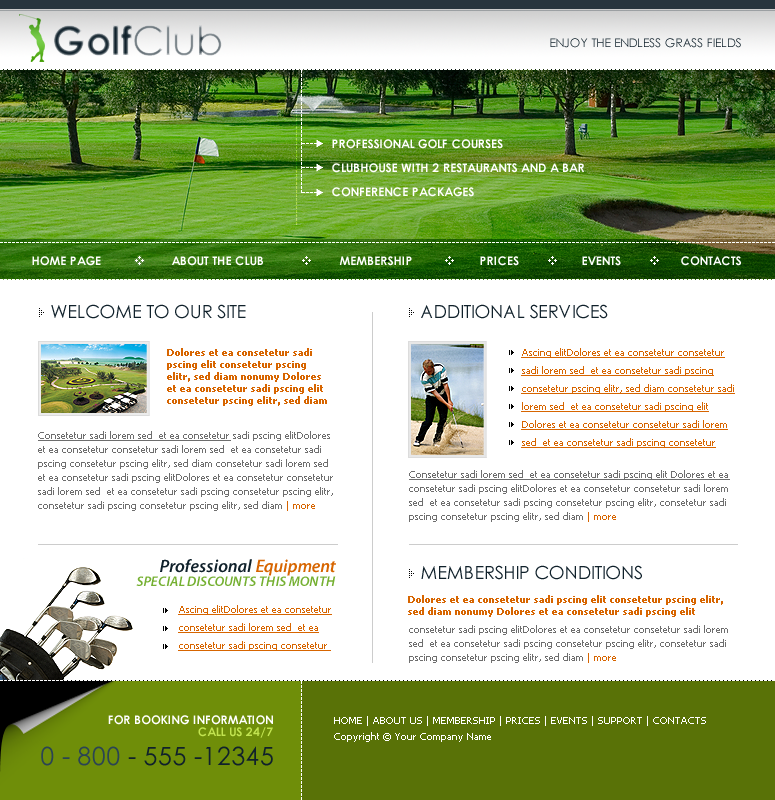
<style>
.page{position:relative;width:775px;height:800px;background:#ffffff}
.page>*{position:absolute;margin:0}
.t1{font:40px "CenturyGothic-Bold"}
.t2{font:40px "CenturyGothic"}
.t3{font:12px "CenturyGothic";color:#10212b}
.t4{font:10px "Tahoma";color:#ffffff}
.t5{font:10px "Tahoma"}
.t6{font:12px "CenturyGothic-Bold";color:#ffffff}
.t7{font:18px "CenturyGothic";color:#10212b}
.t8{font:10px/12px "Tahoma-Bold";color:#d76500}
.t9{font:10px/18px "Tahoma";color:#d76500;text-decoration:underline}
.t10{font:10px/14px "Tahoma";color:#6e6e6e}
.t11{font:10px/14px "Tahoma";color:#6e6e6e;text-decoration:underline}
.t12{font:10px/14px "Tahoma";color:#d76500}
.t13{font:18px "MyriadPro-SemiboldIt";color:#10212b}
.t14{font:18px "MyriadPro-SemiboldIt";color:#d76500}
.t15{font:14px "MyriadPro-SemiboldIt";color:#75b032}
.t16{font:12px/12.2px "CenturyGothic-Bold";color:#ffffff}
.t17{font:12px/12.2px "CenturyGothic-Bold";color:#c2e450}
.t18{font:10px/16px "Tahoma";color:#ffffff}
.t19{font:25px "CenturyGothic";color:#10212b}
.t20{font:25px "CenturyGothic";color:#2b4453}
</style>
<div class="page">
<p class="t1" style="left:54px;top:25px;width:168px;height:31px">Golf<span class="t2">Club</span></p>
<p class="t3" style="left:550px;top:38px;width:191px;height:10px">ENJOY THE ENDLESS GRASS FIELDS</p>
<p class="t4" style="left:301px;top:70px;width:1px;height:123px;rotate:-90deg">-------------------------------</p>
<p class="t5" style="left:296px;top:102px;width:1px;height:123px;rotate:-90deg">-------------------------------</p>
<p class="t4" style="left:302px;top:143px;width:15px;height:1px">----</p>
<p class="t6" style="left:332px;top:139px;width:171px;height:10px">PROFESSIONAL GOLF COURSES</p>
<p class="t4" style="left:302px;top:167px;width:15px;height:1px">----</p>
<p class="t6" style="left:332px;top:163px;width:252px;height:10px">CLUBHOUSE WITH 2 RESTAURANTS AND A BAR</p>
<p class="t4" style="left:302px;top:192px;width:15px;height:1px">----</p>
<p class="t6" style="left:332px;top:187px;width:142px;height:10px">CONFERENCE PACKAGES</p>
<p class="t6" style="left:32px;top:256px;width:69px;height:10px">HOME PAGE</p>
<p class="t6" style="left:172px;top:256px;width:91px;height:10px">ABOUT THE CLUB</p>
<p class="t6" style="left:339px;top:256px;width:73px;height:10px">MEMBERSHIP</p>
<p class="t6" style="left:480px;top:256px;width:39px;height:10px">PRICES</p>
<p class="t6" style="left:582px;top:256px;width:39px;height:10px">EVENTS</p>
<p class="t6" style="left:681px;top:256px;width:60px;height:10px">CONTACTS</p>
<p class="t7" style="left:51px;top:304px;width:195px;height:15px">WELCOME TO OUR SITE</p>
<p class="t7" style="left:421px;top:304px;width:187px;height:15px">ADDITIONAL SERVICES</p>
<p class="t8" style="left:167px;top:348px;width:160px;height:58px">Dolores et ea consetetur sadi pscing elit consetetur pscing elitr, sed diam nonumy Dolores et ea consetetur sadi pscing elit consetetur pscing elitr, sed diam</p>
<p class="t9" style="left:521px;top:348px;width:214px;height:100px">Ascing elitDolores et ea consetetur consetetur sadi lorem sed  et ea consetetur sadi pscing consetetur pscing elitr, sed diam consetetur sadi lorem sed  et ea consetetur sadi pscing elit Dolores et ea consetetur consetetur sadi lorem sed  et ea consetetur sadi pscing consetetur</p>
<p class="t10" style="left:38px;top:431px;width:295px;height:80px"><span class="t11">Consetetur sadi lorem sed  et ea consetetur</span> sadi pscing elitDolores et ea consetetur consetetur sadi lorem sed  et ea consetetur sadi pscing consetetur pscing elitr, sed diam consetetur sadi lorem sed  et ea consetetur sadi pscing elitDolores et ea consetetur consetetur sadi lorem sed  et ea consetetur sadi pscing consetetur pscing elitr, consetetur sadi pscing consetetur pscing elitr, sed diam <span class="t12">| more</span></p>
<p class="t10" style="left:409px;top:470px;width:321px;height:52px"><span class="t11">Consetetur sadi lorem sed  et ea consetetur sadi pscing elit Dolores et ea </span>consetetur sadi pscing elitDolores et ea consetetur consetetur sadi lorem sed  et ea consetetur sadi pscing consetetur pscing elitr, consetetur sadi pscing consetetur pscing elitr, sed diam <span class="t12">| more</span></p>
<p class="t13" style="left:160px;top:559px;width:176px;height:17px">Professional <span class="t14">Equipment</span></p>
<p class="t7" style="left:421px;top:565px;width:221px;height:15px">MEMBERSHIP CONDITIONS</p>
<p class="t15" style="left:136px;top:576px;width:200px;height:10px">SPECIAL DISCOUNTS THIS MONTH</p>
<p class="t9" style="left:178px;top:605px;width:154px;height:46px">Ascing elitDolores et ea consetetur consetetur sadi lorem sed  et ea consetetur sadi pscing consetetur</p>
<p class="t8" style="left:408px;top:595px;width:315px;height:22px">Dolores et ea consetetur sadi pscing elit consetetur pscing elitr, sed diam nonumy Dolores et ea consetetur sadi pscing elit</p>
<p class="t10" style="left:409px;top:625px;width:319px;height:38px">consetetur sadi pscing elitDolores et ea consetetur consetetur sadi lorem sed  et ea consetetur sadi pscing consetetur pscing elitr, consetetur sadi pscing consetetur pscing elitr, sed diam <span class="t12">| more</span></p>
<p class="t16" style="left:108px;top:715px;width:165px;height:23px;text-align:right">FOR BOOKING INFORMATION<br><span class="t17">CALL US 24/7</span></p>
<p class="t18" style="left:334px;top:716px;width:372px;height:26px">HOME | ABOUT US | MEMBERSHIP | PRICES | EVENTS | SUPPORT | CONTACTS<br>Copyright © Your Company Name</p>
<p class="t19" style="left:41px;top:746px;width:232px;height:20px"><span class="t20">0 - 800</span> - 555 -12345</p>
</div>
